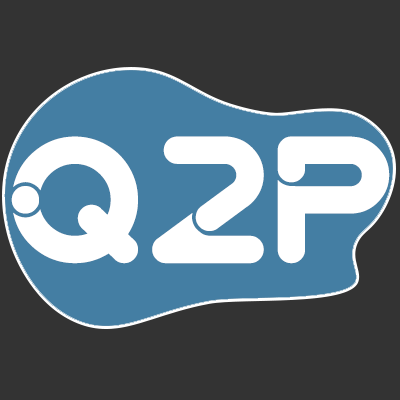
<style>
.page{position:relative;width:400px;height:400px;background:#333333}
.page>*{position:absolute;margin:0}
.t1{font:180.6px "Nixmat";color:#ffffff}
</style>
<div class="page">
<p class="t1" style="left:11px;top:136px;width:379px;height:128px">Q2P</p>
</div>
